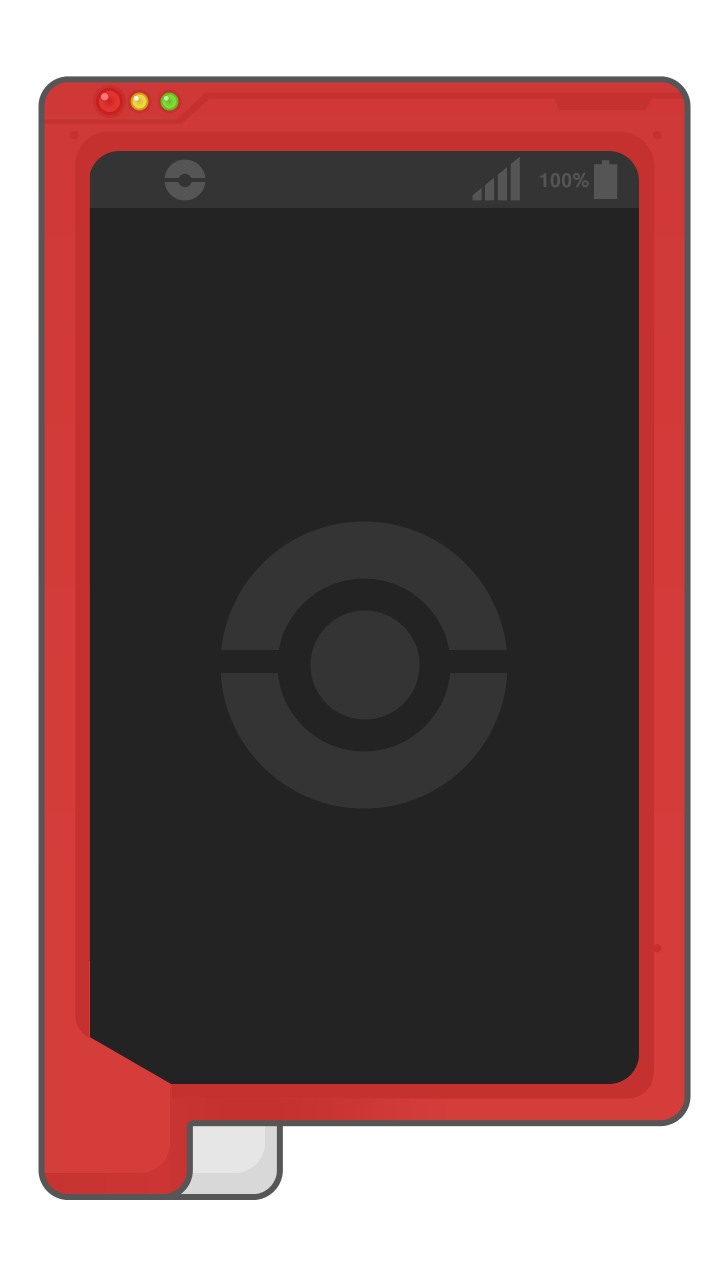
<style>
.page{position:relative;width:720px;height:1280px;background:#232323}
.page>*{position:absolute;margin:0}
.t1{font:18px "H2gtrE";color:#555555}
</style>
<div class="page">
<p class="t1" style="left:540px;top:172px;width:49px;height:16px">100%</p>
</div>
